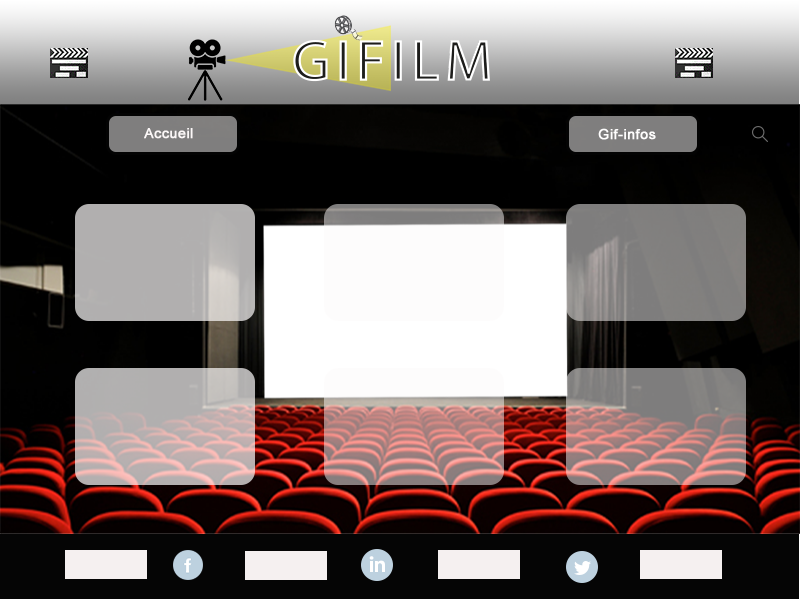
<style>
.page{position:relative;width:800px;height:600px}
.page>*{position:absolute;margin:0}
.t1{font:14px "ArialMT";letter-spacing:0.02em;color:#fcf8f8;font-weight:bold}
.t2{font:14px "ArialMT";letter-spacing:0.02em;color:#fffefe;font-weight:bold}
</style>
<div class="page">
<p class="t1" style="left:144px;top:128px;width:49px;height:11px">Accueil</p>
<p class="t2" style="left:598px;top:128px;width:58px;height:12px">Gif-infos</p>
</div>
